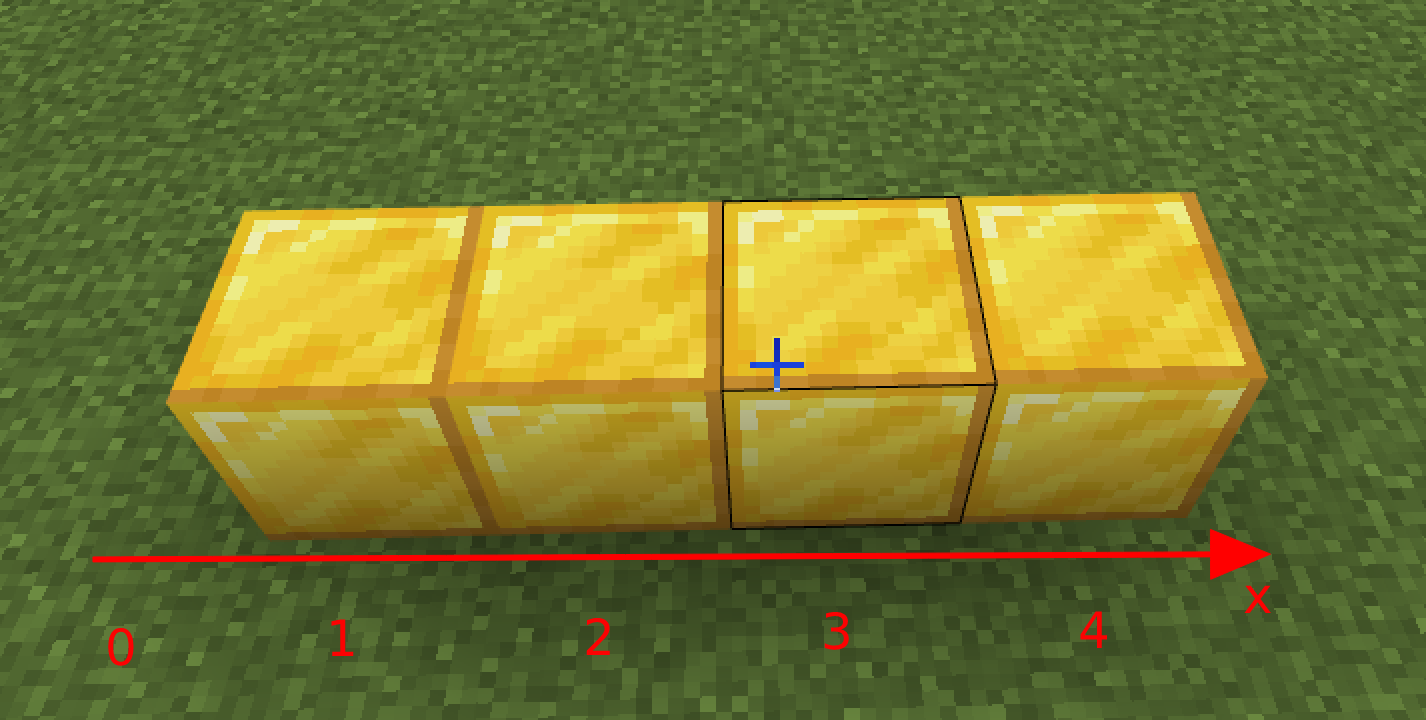
<style>
.page{position:relative;width:1426px;height:720px}
.page>*{position:absolute;margin:0}
.t1{font:50px "DejaVuSans";color:#fc0202}
</style>
<div class="page">
<p class="t1" style="left:1244px;top:585px;width:27px;height:28px">x</p>
<p class="t1" style="left:586px;top:617px;width:24px;height:38px">2</p>
<p class="t1" style="left:824px;top:611px;width:25px;height:39px">3</p>
<p class="t1" style="left:1080px;top:611px;width:28px;height:37px">4</p>
<p class="t1" style="left:108px;top:627px;width:26px;height:39px">0</p>
<p class="t1" style="left:331px;top:619px;width:23px;height:37px">1</p>
</div>
